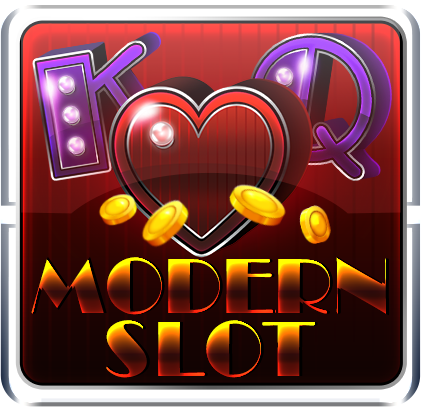
<style>
.page{position:relative;width:421px;height:407px}
.page>*{position:absolute;margin:0}
.t1{font:80px "Broadway";letter-spacing:-0.05em;text-transform:uppercase;font-weight:bold}
.t2{font:80px "Broadway";text-transform:uppercase;font-weight:bold}
</style>
<div class="page">
<p class="t1" style="left:31px;top:256px;width:358px;height:60px">Modern</p>
<p class="t2" style="left:106px;top:320px;width:212px;height:58px">slot</p>
</div>
